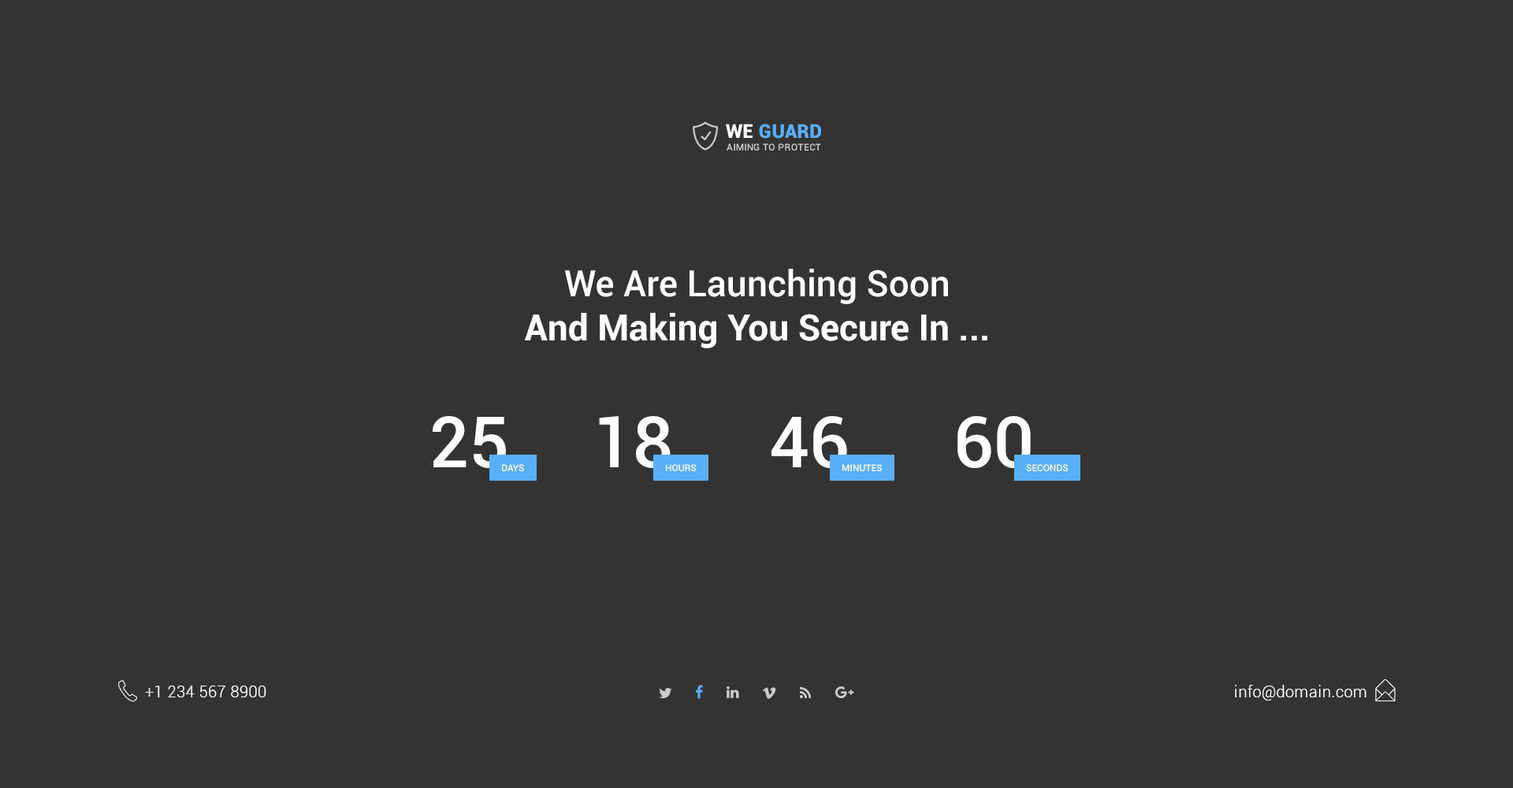
<style>
.page{position:relative;width:1513px;height:788px;background:#333333}
.page>*{position:absolute;margin:0}
.t1{font:18.9px "Roboto-Black";letter-spacing:0.025em;color:#5aaff7;text-transform:uppercase}
.t2{font:18.9px "Roboto-Black";letter-spacing:0.025em;color:#ffffff;text-transform:uppercase}
.t3{font:9.5px "Roboto-Medium";letter-spacing:0.035em;color:#cccccc;text-transform:uppercase}
.t4{font:36.3px/44.1px "Roboto-Bold";color:#ffffff}
.t5{font:36.3px/44.1px "Roboto-Medium";color:#ffffff}
.t6{font:70.9px "Roboto-Medium";color:#ffffff}
.t7{font:9.5px "Roboto-Medium";color:#ffffff;text-transform:uppercase}
.t8{font:15.8px "Roboto-Light";letter-spacing:0.025em;color:#ffffff}
</style>
<div class="page">
<p class="t1" style="left:726px;top:124px;width:95px;height:15px"><span class="t2">we </span>Guard</p>
<p class="t3" style="left:727px;top:143px;width:94px;height:8px">aiming to protect</p>
<p class="t4" style="left:525px;top:269px;width:462px;height:79px;text-align:center"><span class="t5">We Are Launching Soon<br></span>And Making You Secure In ...</p>
<p class="t6" style="left:433px;top:416px;width:73px;height:52px">25</p>
<p class="t6" style="left:599px;top:416px;width:72px;height:52px">18</p>
<p class="t6" style="left:771px;top:416px;width:76px;height:52px">46</p>
<p class="t6" style="left:958px;top:416px;width:73px;height:52px">60</p>
<p class="t7" style="left:502px;top:464px;width:22px;height:7px">days</p>
<p class="t7" style="left:666px;top:464px;width:31px;height:7px">hours</p>
<p class="t7" style="left:842px;top:464px;width:40px;height:7px">minutes</p>
<p class="t7" style="left:1026px;top:464px;width:42px;height:7px">seconds</p>
<p class="t8" style="left:145px;top:686px;width:121px;height:11px">+1 234 567 8900</p>
<p class="t8" style="left:1235px;top:685px;width:132px;height:16px">info@domain.com</p>
</div>
